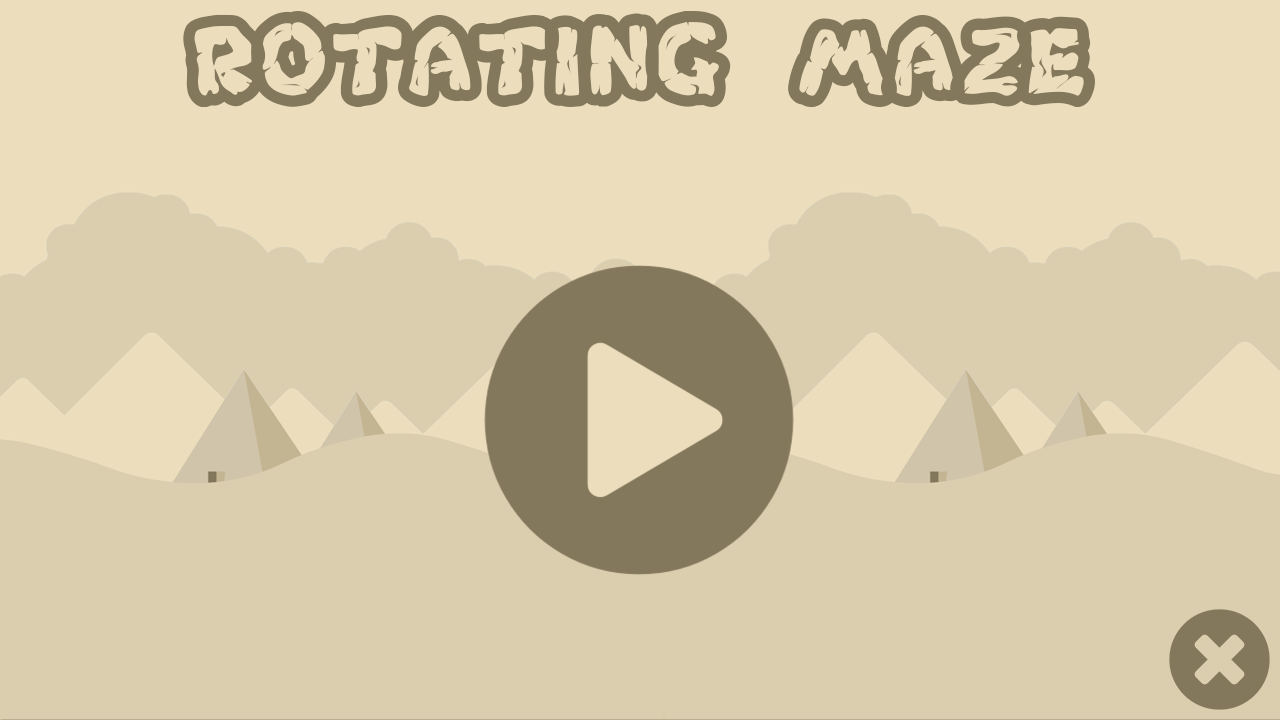
<style>
.page{position:relative;width:1280px;height:720px;background:#dbceaf}
.page>*{position:absolute;margin:0}
.t1{font:144px "Chlorinar-Regular";color:#83775c}
</style>
<div class="page">
<p class="t1" style="left:183px;top:11px;width:912px;height:96px">rotating maze</p>
</div>
